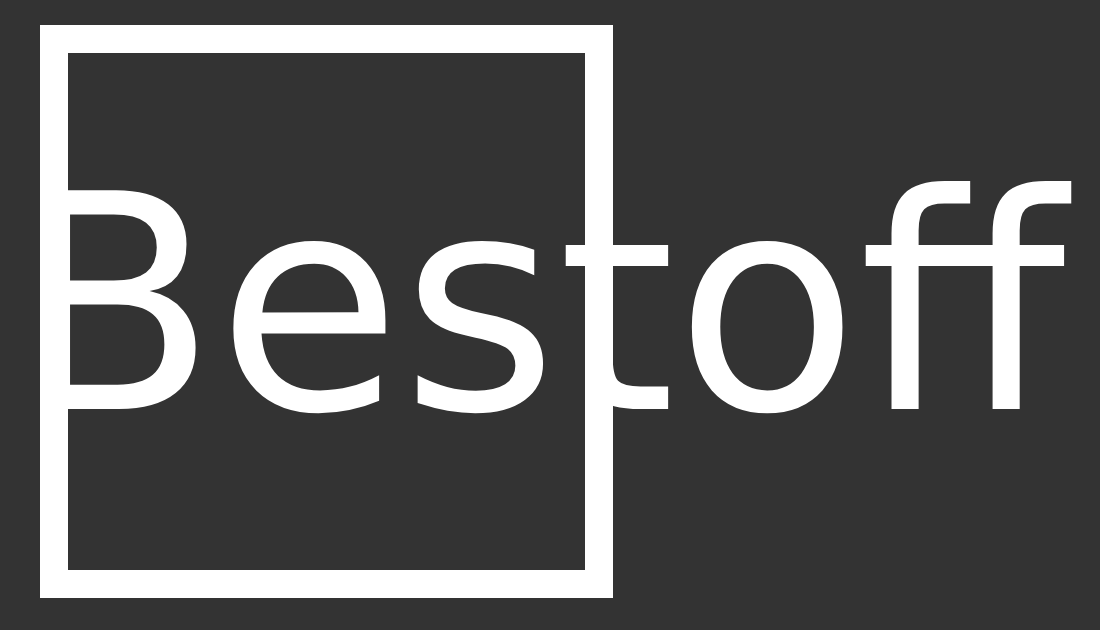
<style>
.page{position:relative;width:1100px;height:630px;background:#333333}
.page>*{position:absolute;margin:0}
.t1{font:300px "DejaVuSans";color:#ffffff}
</style>
<div class="page">
<p class="t1" style="left:40px;top:181px;width:1032px;height:233px">Bestoff</p>
</div>
